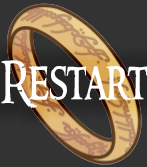
<style>
.page{position:relative;width:147px;height:167px;background:#333333}
.page>*{position:absolute;margin:0}
.t1{font:53.3px "RingbearerMedium";color:#ffffff;scale:0.74 1}
</style>
<div class="page">
<p class="t1" style="left:1px;top:60px;width:147px;height:48px">Restart</p>
</div>
